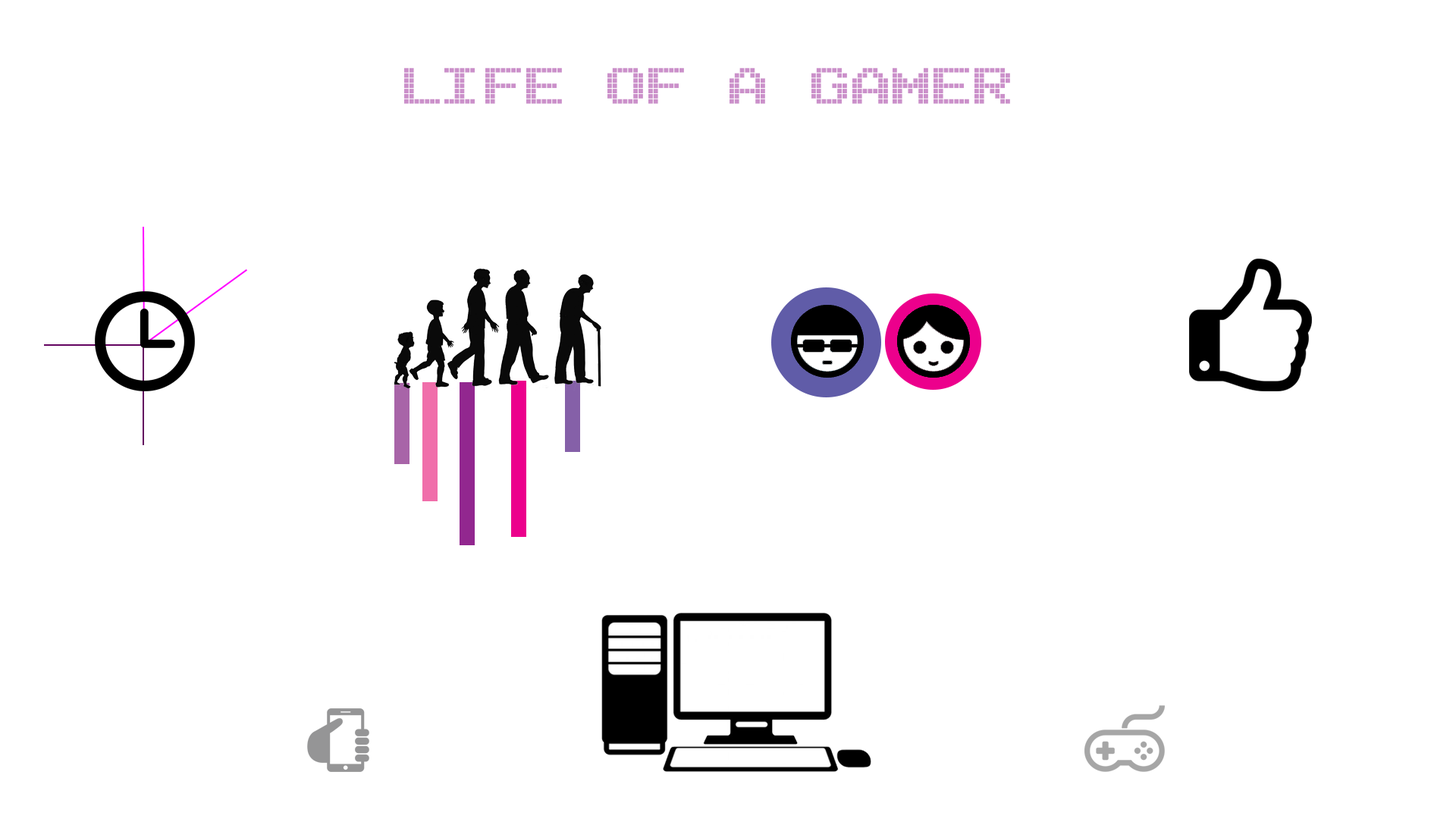
<style>
.page{position:relative;width:1456px;height:819px;background:#ffffff}
.page>*{position:absolute;margin:0}
.t1{font:78.4px "Arcade";color:#cb90ca}
</style>
<div class="page">
<p class="t1" style="left:404px;top:67px;width:606px;height:37px">LIFE OF A GAMER</p>
</div>
